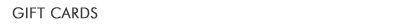
<style>
.page{position:relative;width:400px;height:24px;background:#ffffff}
.page>*{position:absolute;margin:0}
.t1{font:14.7px "FuturaBT-Light";letter-spacing:0.025em;color:#363636;text-transform:uppercase;font-weight:bold}
</style>
<div class="page">
<p class="t1" style="left:12px;top:7px;width:86px;height:12px">gift cards</p>
</div>
